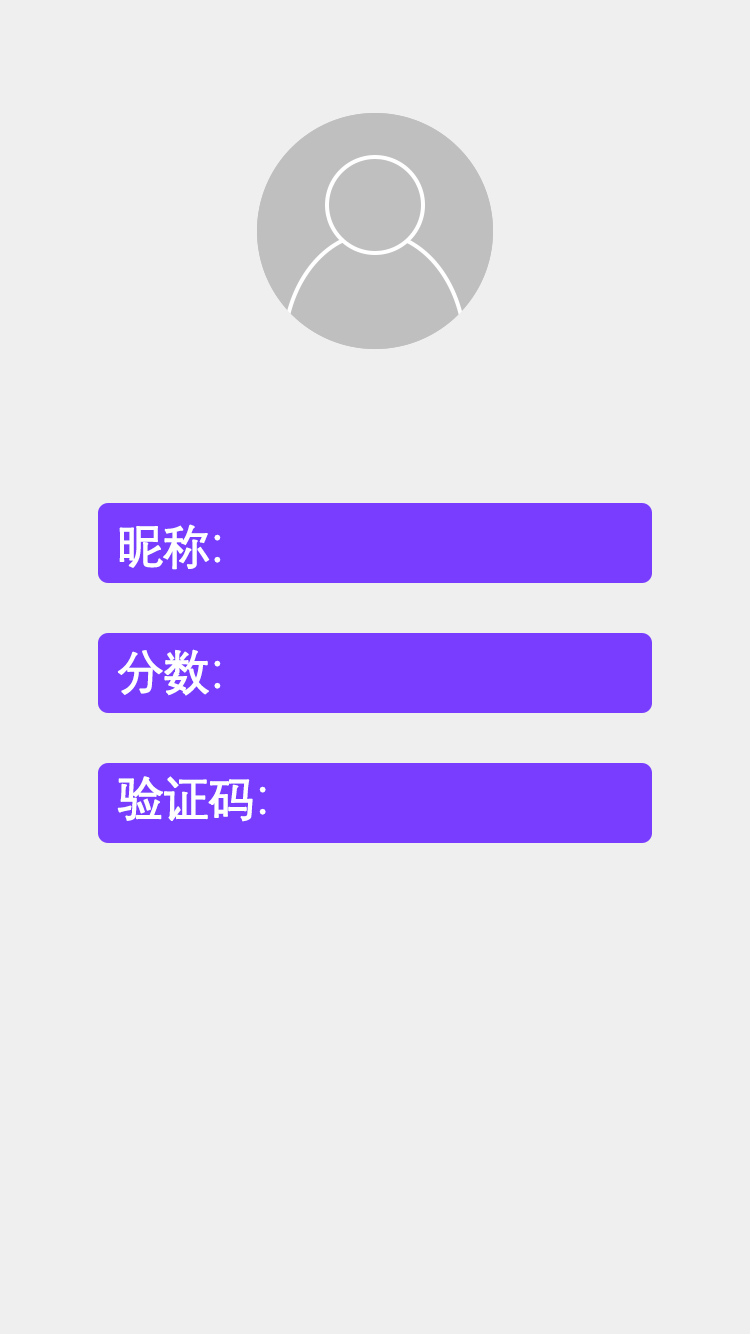
<style>
.page{position:relative;width:750px;height:1334px;background:#efefef}
.page>*{position:absolute;margin:0}
.t1{font:47.1px/126px "DengXian";letter-spacing:-0.065em;color:#ffffff;font-weight:bold}
</style>
<div class="page">
<p class="t1" style="left:117px;top:524px;width:149px;height:298px">昵称：<br>分数：<br>验证码：</p>
</div>
